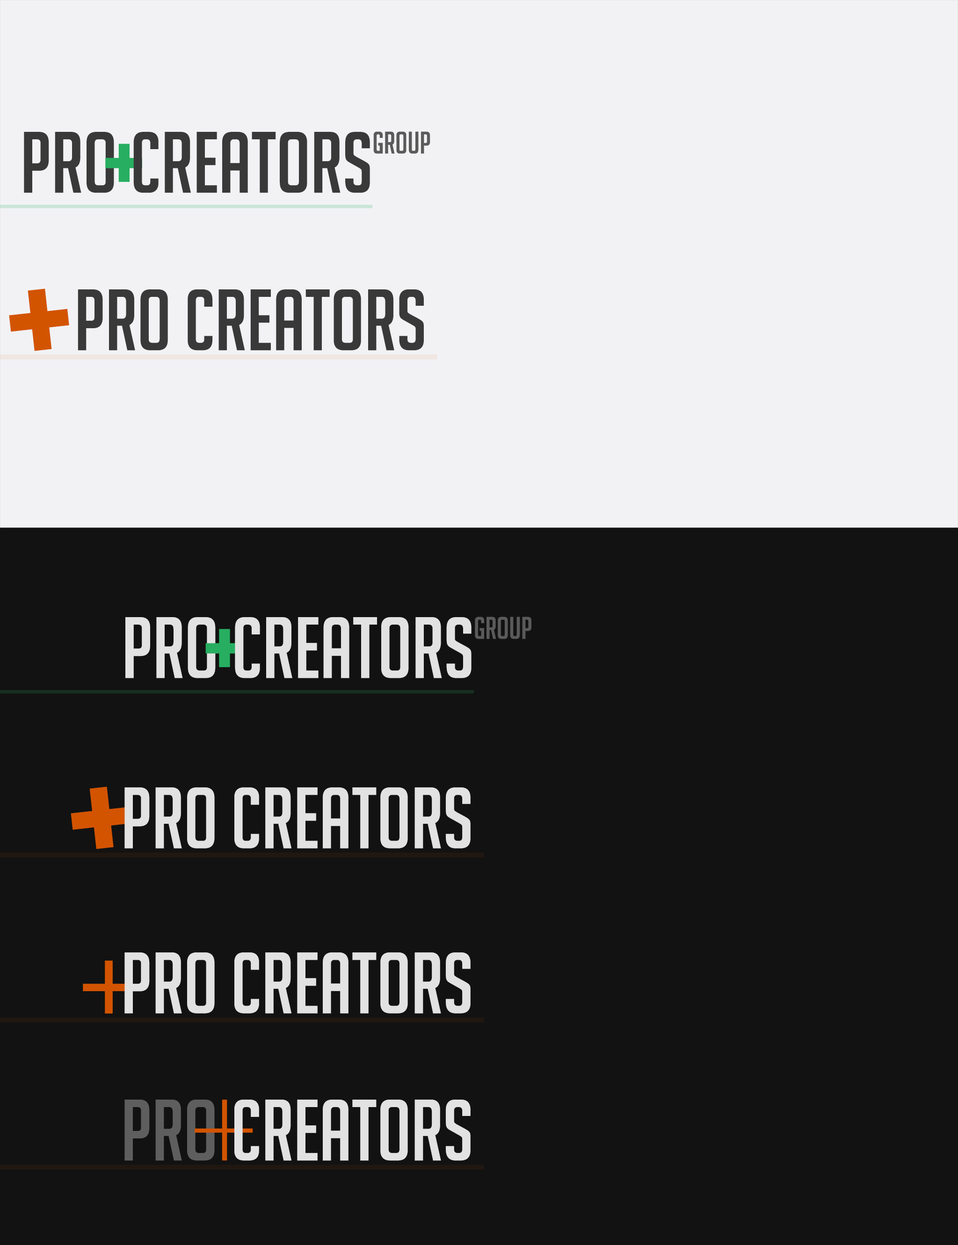
<style>
.page{position:relative;width:958px;height:1245px;background:#121212}
.page>*{position:absolute;margin:0}
.t1{font:84.7px "BigNoodleTitling";color:#393939}
.t2{font:30.4px "BigNoodleTitling";color:#5a5a5a}
.t3{font:121.6px "BigNoodleTitling";color:#27ae60}
.t4{font:194.3px "BigNoodleTitling";color:#d35400}
.t5{font:84.7px "BigNoodleTitling";color:#e2e2e2}
.t6{font:84.7px "BigNoodleTitling";color:#5e5e5e}
</style>
<div class="page">
<p class="t1" style="left:24px;top:132px;width:90px;height:61px">pro</p>
<p class="t1" style="left:133px;top:132px;width:237px;height:61px">creators</p>
<p class="t2" style="left:373px;top:131px;width:57px;height:23px">Group</p>
<p class="t3" style="left:105px;top:144px;width:37px;height:38px">+</p>
<p class="t4" style="left:9px;top:289px;width:60px;height:62px;rotate:-6deg">+</p>
<p class="t1" style="left:78px;top:289px;width:90px;height:62px">pro</p>
<p class="t1" style="left:188px;top:289px;width:236px;height:62px">creators</p>
<p class="t5" style="left:125px;top:617px;width:91px;height:61px">pro</p>
<p class="t5" style="left:235px;top:617px;width:236px;height:61px">creators</p>
<p class="t2" style="left:475px;top:617px;width:56px;height:22px">Group</p>
<p class="t3" style="left:205px;top:629px;width:38px;height:38px">+</p>
<p class="t4" style="left:71px;top:786px;width:60px;height:63px;rotate:-6deg">+</p>
<p class="t5" style="left:124px;top:787px;width:91px;height:62px">pro</p>
<p class="t5" style="left:234px;top:787px;width:236px;height:62px">creators</p>
<p class="t5" style="left:124px;top:952px;width:91px;height:62px">pro</p>
<p class="t5" style="left:234px;top:952px;width:236px;height:62px">creators</p>
<p class="t6" style="left:124px;top:1100px;width:91px;height:61px">pro</p>
<p class="t5" style="left:234px;top:1100px;width:236px;height:61px">creators</p>
</div>
